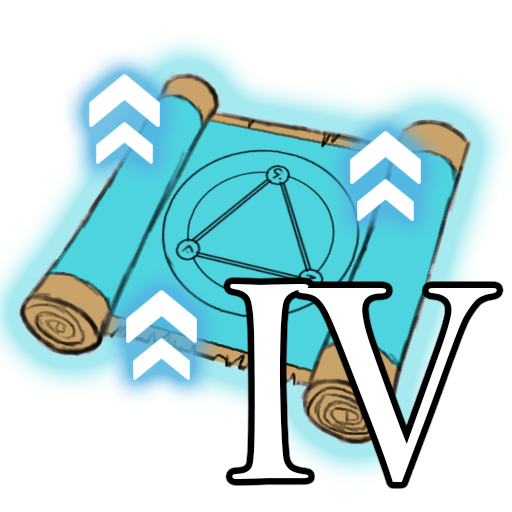
<style>
.page{position:relative;width:512px;height:512px;background:#ffffff}
.page>*{position:absolute;margin:0}
.t1{font:300px "BellMT";letter-spacing:-0.1em;color:#ffffff}
</style>
<div class="page">
<p class="t1" style="left:230px;top:284px;width:267px;height:198px">IV</p>
</div>
